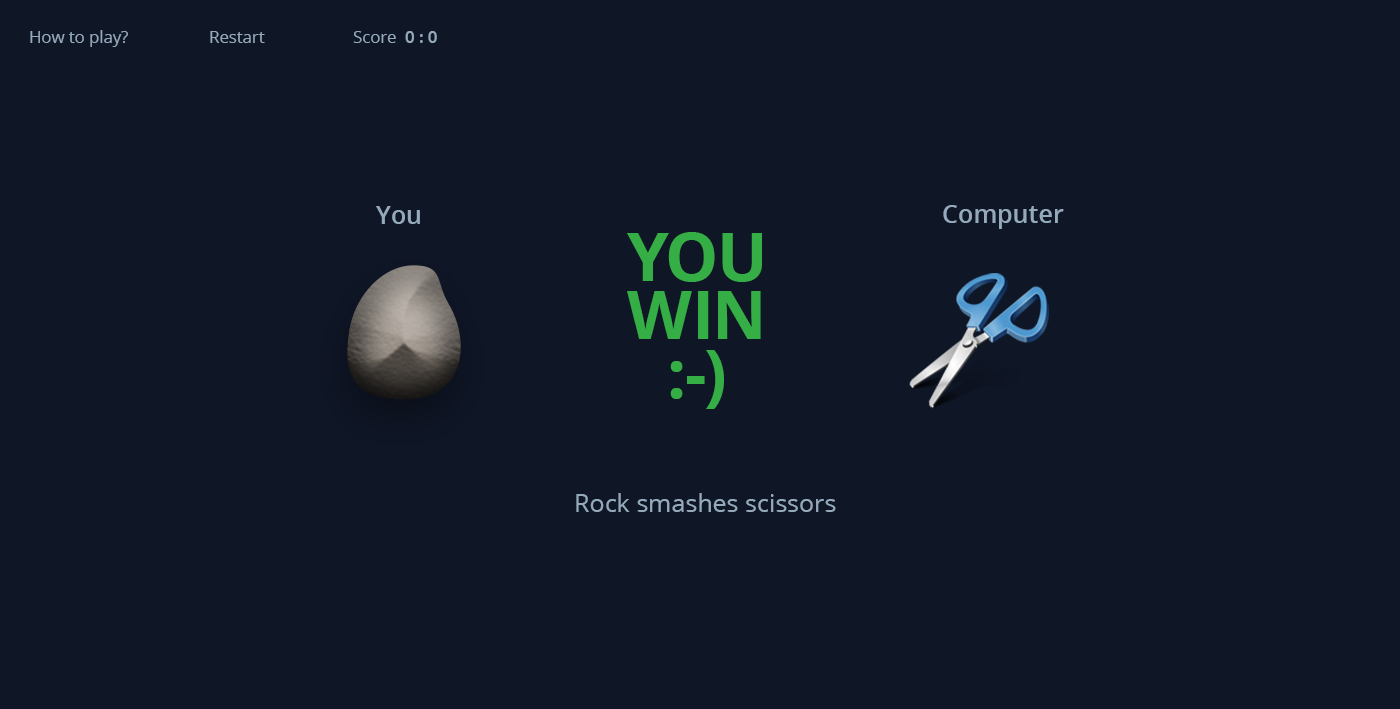
<style>
.page{position:relative;width:1400px;height:709px;background:#0f1626}
.page>*{position:absolute;margin:0}
.t1{font:16.7px "OpenSans";color:#94a9bb}
.t2{font:16.7px "OpenSans-Semibold";color:#94a9bb}
.t3{font:25px "OpenSans-Semibold";color:#94a9bb}
.t4{font:66.7px/58.3px "OpenSans-Bold";color:#35ae46;text-transform:uppercase}
.t5{font:25px/88.8px "OpenSans-Bold";color:#35ae46}
.t6{font:25px "OpenSans";color:#94a9bb}
</style>
<div class="page">
<p class="t1" style="left:30px;top:30px;width:407px;height:17px">How to play?        Restart    Score<span class="t2">  0 : 0</span></p>
<p class="t3" style="left:376px;top:206px;width:44px;height:18px">You</p>
<p class="t3" style="left:943px;top:205px;width:121px;height:24px">Computer</p>
<p class="t4" style="left:627px;top:232px;width:135px;height:177px;text-align:center"><span class="t5"><br></span>you<br>win<br>:-)</p>
<p class="t6" style="left:576px;top:493px;width:260px;height:19px">Rock smashes scissors</p>
</div>
